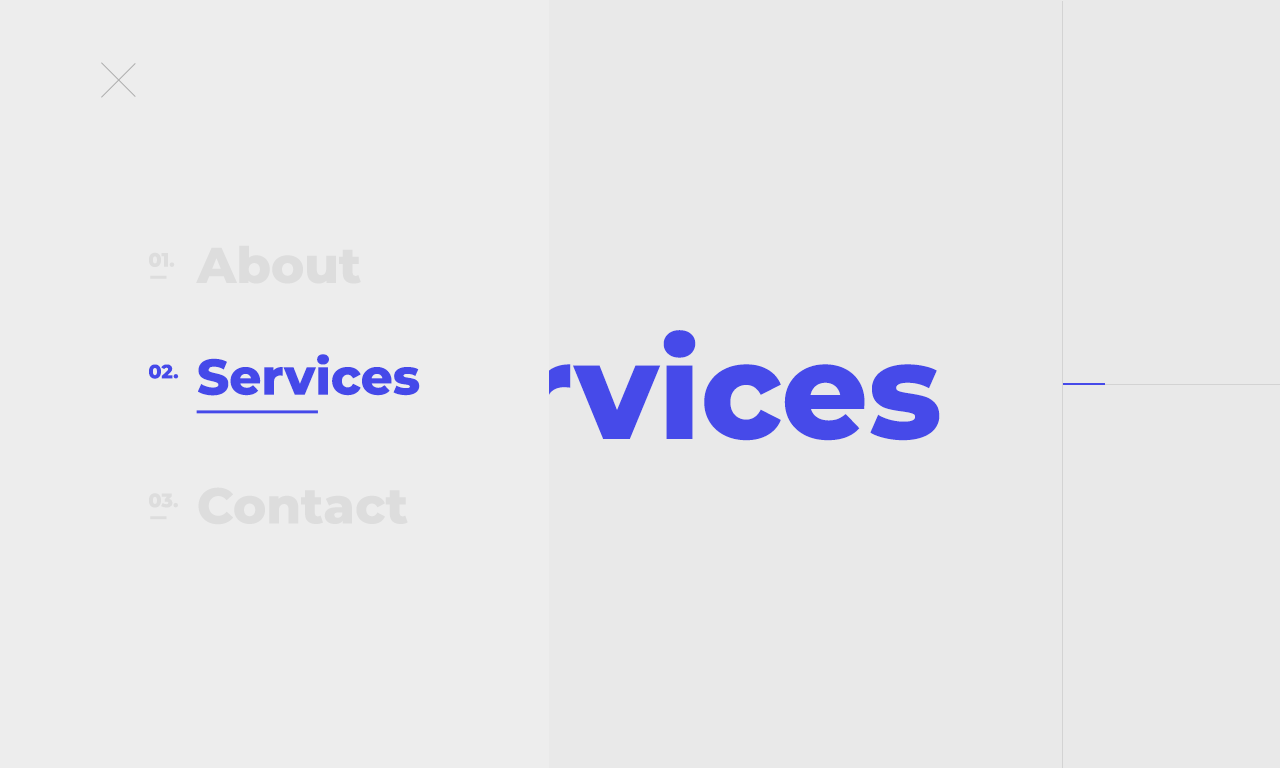
<style>
.page{position:relative;width:1280px;height:768px;background:#e9e9e9}
.page>*{position:absolute;margin:0}
.t1{font:50px "Montserrat-ExtraBold";color:#dddddd}
.t2{font:19.3px "Montserrat-ExtraBold";color:#dddddd}
.t3{font:135.1px "Montserrat-ExtraBold";color:#464ae9}
.t4{font:135.1px "Montserrat-ExtraBold"}
.t5{font:19.3px "Montserrat-ExtraBold";color:#4549e9}
.t6{font:50px "Montserrat-ExtraBold";color:#4549e9}
</style>
<div class="page">
<p class="t1" style="left:196px;top:245px;width:165px;height:39px">About</p>
<p class="t2" style="left:149px;top:252px;width:26px;height:15px">01.</p>
<p class="t3" style="left:341px;top:330px;width:599px;height:111px">Services</p>
<p class="t3" style="left:341px;top:330px;width:599px;height:111px">Services</p>
<p class="t4" style="left:341px;top:330px;width:599px;height:111px">Services</p>
<p class="t3" style="left:341px;top:330px;width:599px;height:111px">Services</p>
<p class="t5" style="left:149px;top:364px;width:30px;height:15px">02.</p>
<p class="t6" style="left:198px;top:354px;width:222px;height:42px">Services</p>
<p class="t2" style="left:149px;top:493px;width:29px;height:15px">03.</p>
<p class="t1" style="left:198px;top:487px;width:210px;height:38px">Contact</p>
</div>
